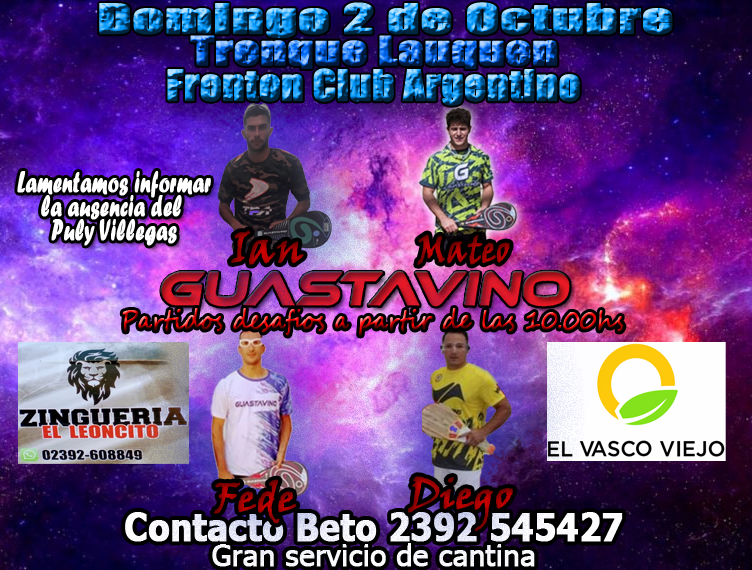
<style>
.page{position:relative;width:752px;height:570px}
.page>*{position:absolute;margin:0}
.t1{font:37.9px "Impact";font-weight:bold;scale:1.6 1}
.t2{font:36.8px "Impact";font-weight:bold;scale:1.34 1}
.t3{font:39.3px "Impact";font-weight:bold;scale:1.06 1}
.t4{font:29.9px/24.2px "ForteMT";color:#ffffff;font-weight:bold;scale:0.67 1}
.t5{font:44.7px "VinerHandITC";font-weight:bold;scale:0.92 1}
.t6{font:38.7px "VinerHandITC";font-weight:bold;scale:0.8 1}
.t7{font:25.7px "SegoeScript";font-weight:bold;scale:0.86 1}
.t8{font:39.9px "VinerHandITC";font-weight:bold;scale:1.03 1}
.t9{font:37.9px "Tahoma-Bold";color:#ffffff;font-weight:bold;scale:0.89 1}
.t10{font:30.3px "Tahoma";color:#ffffff;font-weight:bold;scale:0.95 1}
</style>
<div class="page">
<p class="t1" style="left:99px;top:2px;width:574px;height:37px">Domingo 2 de Octubre</p>
<p class="t2" style="left:190px;top:35px;width:368px;height:34px">Trenque Lauquen</p>
<p class="t3" style="left:167px;top:68px;width:413px;height:38px">Fronton Club Argentino</p>
<p class="t4" style="left:17px;top:171px;width:194px;height:75px;text-align:center">Lamentamos informar<br>la ausencia del <br>Puly Villegas</p>
<p class="t5" style="left:231px;top:230px;width:73px;height:35px">Ian</p>
<p class="t6" style="left:417px;top:234px;width:93px;height:31px">Mateo</p>
<p class="t7" style="left:122px;top:308px;width:502px;height:28px">Partidos desafios a partir de las 10.00hs</p>
<p class="t8" style="left:214px;top:479px;width:83px;height:45px">Fede</p>
<p class="t8" style="left:408px;top:476px;width:105px;height:55px">Diego</p>
<p class="t9" style="left:125px;top:512px;width:498px;height:30px">Contacto Beto 2392 545427</p>
<p class="t10" style="left:212px;top:543px;width:323px;height:24px">Gran servicio de cantina</p>
</div>
